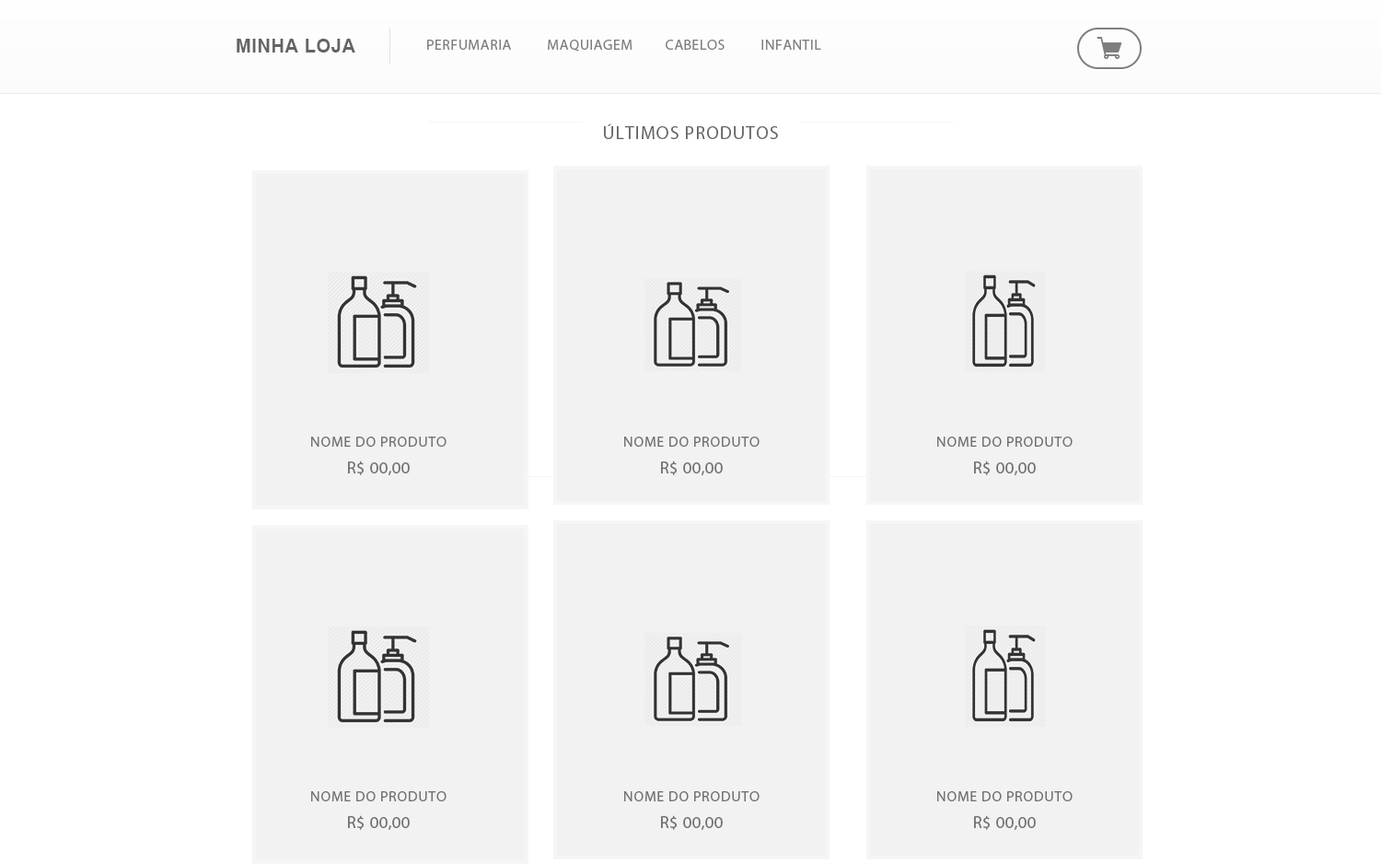
<style>
.page{position:relative;width:1381px;height:864px;background:#ffffff}
.page>*{position:absolute;margin:0}
.t1{font:18.4px "Arial-BoldMT";letter-spacing:0.03em;color:#656363;text-transform:uppercase}
.t2{font:14.7px "MyriadPro-Regular";letter-spacing:0.03em;color:#7f7f7f}
.t3{font:18.4px "MyriadPro-Regular";letter-spacing:0.05em;color:#656363;text-transform:uppercase}
.t4{font:14.7px "MyriadPro-Regular";letter-spacing:0.04em;color:#717171;text-transform:uppercase}
.t5{font:16.6px "MyriadPro-Regular";letter-spacing:0.04em;color:#717171;text-transform:uppercase}
</style>
<div class="page">
<p class="t1" style="left:237px;top:39px;width:118px;height:13px">Minha loja</p>
<p class="t2" style="left:427px;top:40px;width:394px;height:12px">PERFUMARIA          MAQUIAGEM         CABELOS          INFANTIL</p>
<p class="t3" style="left:604px;top:123px;width:174px;height:16px">ÚLTIMOS PRODUTOS</p>
<p class="t4" style="left:311px;top:436px;width:135px;height:10px">Nome do produto</p>
<p class="t4" style="left:624px;top:436px;width:135px;height:10px">nome do produto</p>
<p class="t4" style="left:937px;top:436px;width:135px;height:10px">nome do produto</p>
<p class="t5" style="left:348px;top:460px;width:62px;height:15px">R$ 00,00</p>
<p class="t5" style="left:661px;top:460px;width:62px;height:15px">R$ 00,00</p>
<p class="t5" style="left:974px;top:460px;width:62px;height:15px">R$ 00,00</p>
<p class="t4" style="left:311px;top:791px;width:135px;height:10px">Nome do produto</p>
<p class="t4" style="left:624px;top:791px;width:135px;height:10px">nome do produto</p>
<p class="t4" style="left:937px;top:791px;width:135px;height:10px">nome do produto</p>
<p class="t5" style="left:348px;top:815px;width:62px;height:14px">R$ 00,00</p>
<p class="t5" style="left:661px;top:815px;width:62px;height:14px">R$ 00,00</p>
<p class="t5" style="left:974px;top:815px;width:62px;height:14px">R$ 00,00</p>
</div>
